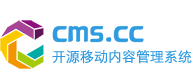
<style>
.page{position:relative;width:193px;height:72px;background:#ffffff}
.page>*{position:absolute;margin:0}
.t1{font:14px "STHeitiSC-Light";letter-spacing:0.001em;color:#2f9be0}
</style>
<div class="page">
<p class="t1" style="left:52px;top:50px;width:140px;height:14px">开源移动内容管理系统</p>
</div>
